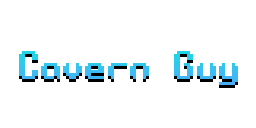
<style>
.page{position:relative;width:256px;height:128px;background:#ffffff}
.page>*{position:absolute;margin:0}
.t1{font:42.3px "SystematicTTBRK";color:#41b6f4}
</style>
<div class="page">
<p class="t1" style="left:19px;top:51px;width:219px;height:34px">Cavern Guy</p>
</div>
